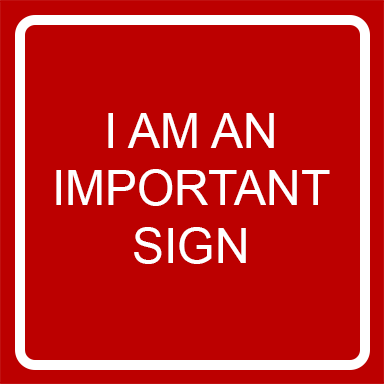
<style>
.page{position:relative;width:384px;height:384px;background:#bc0000}
.page>*{position:absolute;margin:0}
.t1{font:48px "ArialMT";color:#ffffff}
</style>
<div class="page">
<p class="t1" style="left:56px;top:113px;width:274px;height:151px;text-align:center">I AM AN<br>IMPORTANT<br>SIGN</p>
</div>
